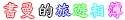
<style>
.page{position:relative;width:125px;height:20px;background:#ffffff}
.page>*{position:absolute;margin:0}
.t1{font:16px "DFKaiShu-SB-Estd-BF";color:#ffffff}
</style>
<div class="page">
<p class="t1" style="left:39px;top:4px;width:14px;height:13px">的</p>
<p class="t1" style="left:56px;top:4px;width:15px;height:12px">旅</p>
<p class="t1" style="left:90px;top:4px;width:14px;height:13px">相</p>
<p class="t1" style="left:108px;top:2px;width:14px;height:16px">簿</p>
</div>
